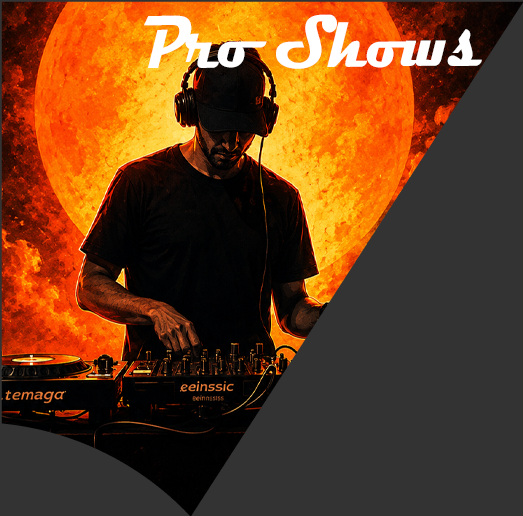
<style>
.page{position:relative;width:523px;height:516px;background:#333333}
.page>*{position:absolute;margin:0}
.t1{font:75.8px "Magneto-Bold";color:#ffffff;scale:0.76 1}
</style>
<div class="page">
<p class="t1" style="left:144px;top:14px;width:338px;height:55px">Pro Shows</p>
</div>
